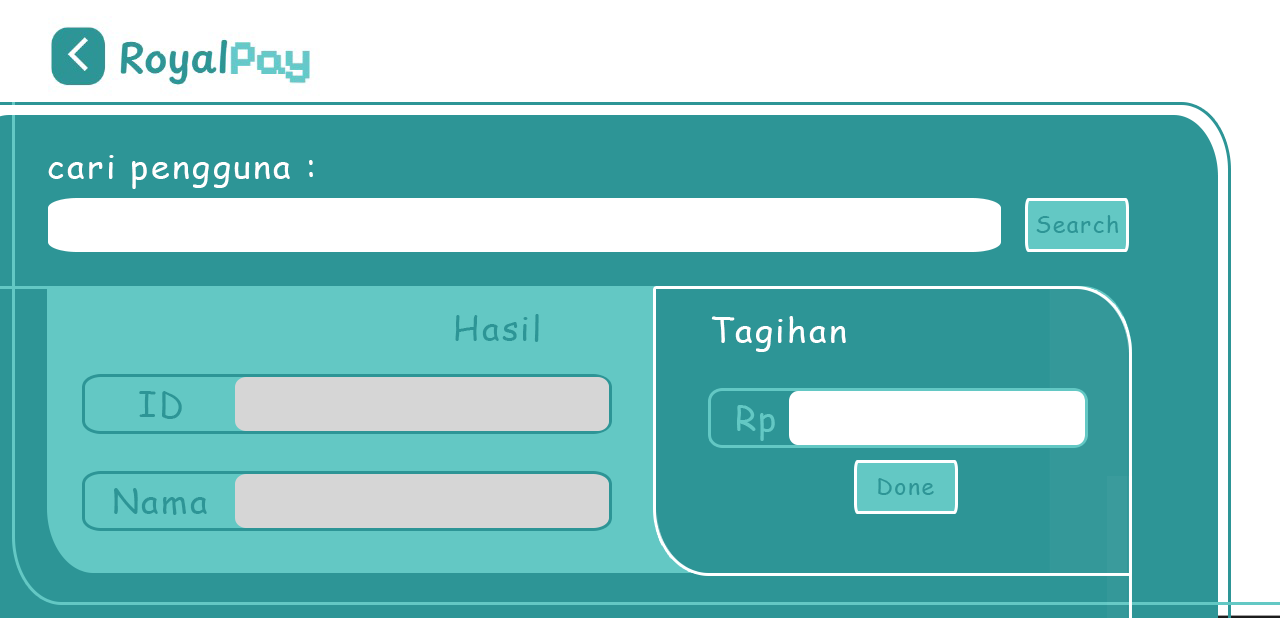
<style>
.page{position:relative;width:1280px;height:618px;background:#2d9596}
.page>*{position:absolute;margin:0}
.t1{font:33.7px "ComicSansMS";letter-spacing:0.075em;color:#ffffff}
.t2{font:22.7px "ComicSansMS";letter-spacing:0.075em;color:#2d9596}
.t3{font:33.7px "ComicSansMS";letter-spacing:0.075em;color:#2d9596}
.t4{font:33.7px "ComicSansMS";letter-spacing:0.075em;color:#63c8c4}
</style>
<div class="page">
<p class="t1" style="left:48px;top:155px;width:265px;height:34px">cari pengguna :</p>
<p class="t2" style="left:1036px;top:215px;width:83px;height:18px">Search</p>
<p class="t3" style="left:455px;top:314px;width:84px;height:28px">Hasil</p>
<p class="t1" style="left:711px;top:316px;width:135px;height:36px">Tagihan</p>
<p class="t3" style="left:139px;top:391px;width:43px;height:28px">ID</p>
<p class="t4" style="left:737px;top:405px;width:38px;height:36px">Rp</p>
<p class="t2" style="left:878px;top:478px;width:56px;height:17px">Done</p>
<p class="t3" style="left:114px;top:488px;width:93px;height:27px">Nama</p>
</div>
